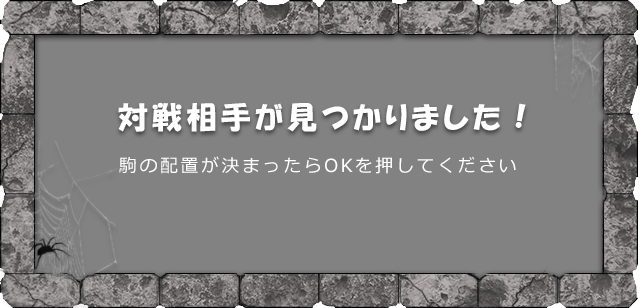
<style>
.page{position:relative;width:639px;height:308px;background:#828282}
.page>*{position:absolute;margin:0}
.t1{font:30px "HGPSoeiKakupoptai";letter-spacing:0.14em;color:#ffffff}
.t2{font:18px "Meiryo";letter-spacing:0.14em;color:#ffffff}
</style>
<div class="page">
<p class="t1" style="left:118px;top:102px;width:408px;height:30px">対戦相手が見つかりました！</p>
<p class="t2" style="left:119px;top:156px;width:397px;height:18px">駒の配置が決まったらOKを押してください</p>
</div>
